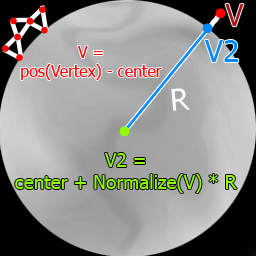
<style>
.page{position:relative;width:256px;height:256px}
.page>*{position:absolute;margin:0}
.t1{font:30px "Tahoma";color:#a31818}
.t2{font:30px "Tahoma";color:#008aff}
.t3{font:15.9px "Tahoma";color:#ff0000}
.t4{font:30px "Tahoma";color:#ffffff}
.t5{font:19.1px "Tahoma";color:#90ff00}
</style>
<div class="page">
<p class="t1" style="left:225px;top:4px;width:19px;height:22px">V</p>
<p class="t2" style="left:205px;top:40px;width:34px;height:22px">V2</p>
<p class="t3" style="left:21px;top:46px;width:141px;height:34px;text-align:center">V =<br>pos(Vertex) - center</p>
<p class="t4" style="left:171px;top:88px;width:19px;height:23px;rotate:-5deg">R</p>
<p class="t5" style="left:15px;top:153px;width:222px;height:40px;text-align:center">V2 =<br>center + Normalize(V) * R</p>
</div>
